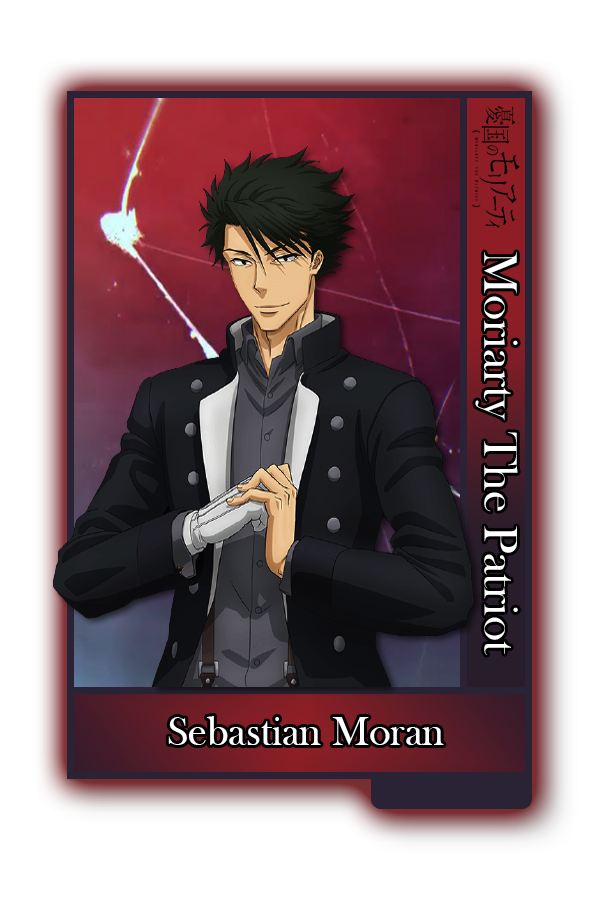
<style>
.page{position:relative;width:600px;height:900px;background:#ffffff}
.page>*{position:absolute;margin:0}
.t1{font:48.8px "BaskOldFace";color:#ffffff}
.t2{font:41.7px "BaskOldFace";color:#ffffff}
</style>
<div class="page">
<p class="t1" style="left:475px;top:252px;width:43px;height:403px;rotate:90deg">Moriarty The Patriot</p>
<p class="t2" style="left:168px;top:716px;width:276px;height:29px">Sebastian Moran</p>
</div>
